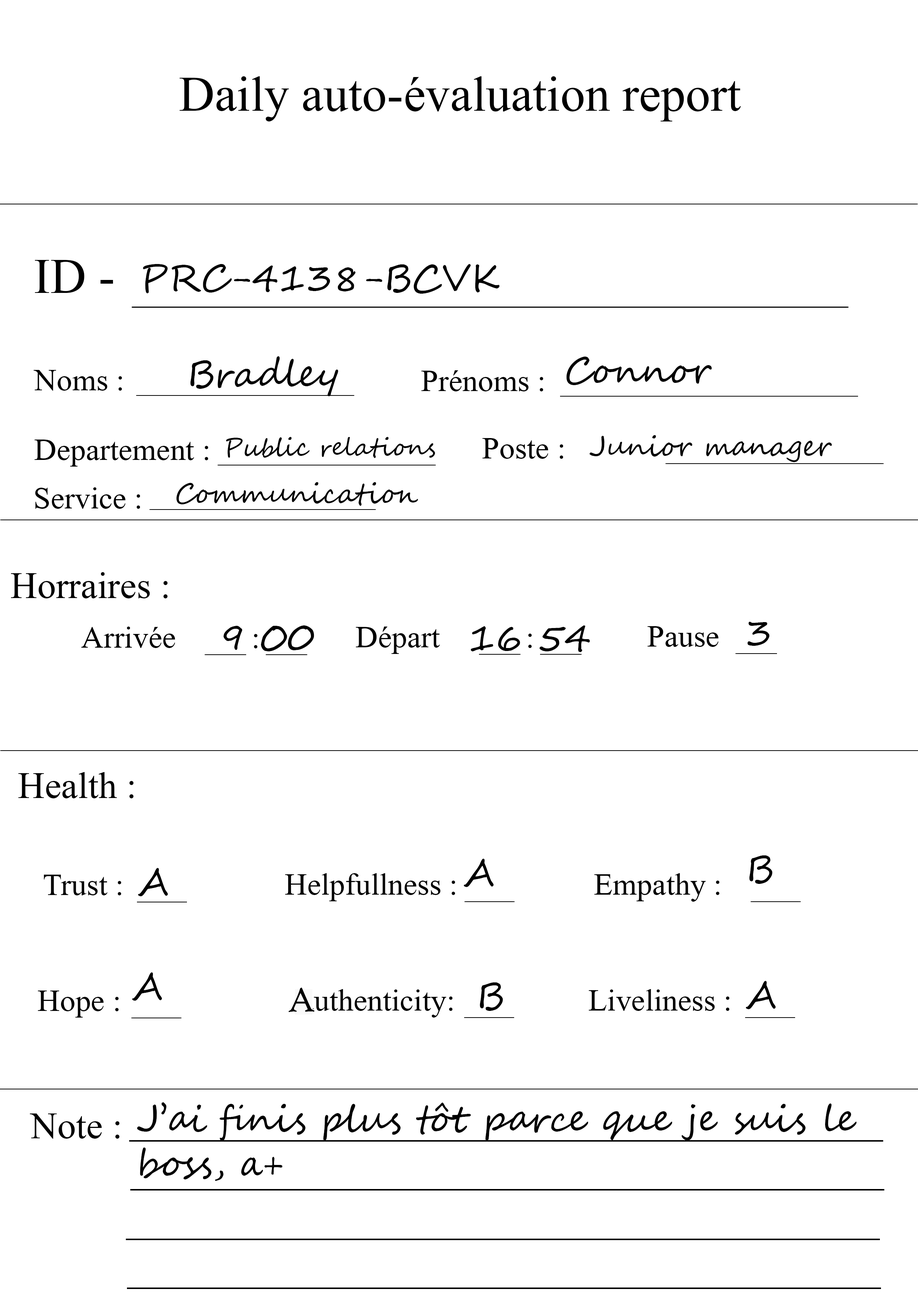
<style>
.page{position:relative;width:918px;height:1299px;background:#ffffff}
.page>*{position:absolute;margin:0}
.t1{font:74px "Microsoft-Himalaya";color:#000000}
.t2{font:37px "SegoeScript";color:#000000}
.t3{font:46.3px "Microsoft-Himalaya";color:#000000}
.t4{font:24.7px "SegoeScript";color:#000000}
.t5{font:27.8px "SegoeScript";color:#000000}
.t6{font:55.5px "Microsoft-Himalaya";color:#000000}
.t7{font:37px "HighTowerText-Reg";color:#000000}
</style>
<div class="page">
<p class="t1" style="left:180px;top:76px;width:561px;height:45px">Daily auto-évaluation report</p>
<p class="t1" style="left:35px;top:260px;width:78px;height:33px">ID -</p>
<p class="t2" style="left:143px;top:264px;width:357px;height:30px">PRC-4138-BCVK</p>
<p class="t2" style="left:190px;top:356px;width:148px;height:40px">Bradley</p>
<p class="t2" style="left:566px;top:357px;width:146px;height:28px">Connor</p>
<p class="t3" style="left:34px;top:370px;width:88px;height:21px">Noms :</p>
<p class="t3" style="left:421px;top:370px;width:122px;height:21px">Prénoms :</p>
<p class="t4" style="left:226px;top:437px;width:209px;height:21px">Public relations</p>
<p class="t3" style="left:482px;top:438px;width:81px;height:21px">Poste :</p>
<p class="t5" style="left:589px;top:435px;width:243px;height:27px">Junior manager</p>
<p class="t3" style="left:34px;top:439px;width:174px;height:27px">Departement :</p>
<p class="t5" style="left:176px;top:482px;width:242px;height:24px">Communication</p>
<p class="t3" style="left:35px;top:487px;width:105px;height:22px">Service :</p>
<p class="t6" style="left:11px;top:572px;width:157px;height:26px">Horraires :</p>
<p class="t3" style="left:81px;top:626px;width:94px;height:22px">Arrivée</p>
<p class="t2" style="left:224px;top:625px;width:90px;height:26px">9 00</p>
<p class="t3" style="left:356px;top:626px;width:84px;height:28px">Départ</p>
<p class="t2" style="left:471px;top:625px;width:119px;height:27px">16 54</p>
<p class="t3" style="left:648px;top:626px;width:71px;height:21px">Pause</p>
<p class="t2" style="left:747px;top:622px;width:23px;height:24px">3</p>
<p class="t3" style="left:254px;top:634px;width:4px;height:14px">:</p>
<p class="t3" style="left:528px;top:633px;width:4px;height:15px">:</p>
<p class="t6" style="left:18px;top:772px;width:116px;height:26px">Health :</p>
<p class="t2" style="left:749px;top:855px;width:24px;height:29px">B</p>
<p class="t2" style="left:138px;top:868px;width:30px;height:28px">A</p>
<p class="t2" style="left:464px;top:859px;width:30px;height:28px">A</p>
<p class="t3" style="left:44px;top:874px;width:77px;height:21px">Trust :</p>
<p class="t3" style="left:285px;top:873px;width:170px;height:28px">Helpfullness :</p>
<p class="t3" style="left:594px;top:873px;width:126px;height:28px">Empathy :</p>
<p class="t2" style="left:132px;top:972px;width:30px;height:29px">A</p>
<p class="t7" style="left:288px;top:987px;width:27px;height:25px">A</p>
<p class="t3" style="left:301px;top:989px;width:152px;height:28px">authenticity:</p>
<p class="t2" style="left:480px;top:982px;width:23px;height:29px">B</p>
<p class="t3" style="left:589px;top:989px;width:141px;height:22px">Liveliness :</p>
<p class="t2" style="left:746px;top:981px;width:30px;height:28px">A</p>
<p class="t3" style="left:38px;top:990px;width:81px;height:27px">Hope :</p>
<p class="t2" style="left:137px;top:1102px;width:720px;height:79px">J’ai finis plus tôt parce que je suis le <br>boss, a+</p>
<p class="t6" style="left:30px;top:1113px;width:90px;height:25px">Note :</p>
</div>
